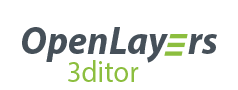
<style>
.page{position:relative;width:238px;height:90px;background:#ffffff}
.page>*{position:absolute;margin:0}
.t1{font:40px "MyriadPro-BoldIt";color:#465059;scale:0.95 1}
.t2{font:30px "MyriadPro-Regular";color:#8cbe3f;scale:0.95 1}
</style>
<div class="page">
<p class="t1" style="left:22px;top:27px;width:195px;height:36px">OpenLay   rs</p>
<p class="t2" style="left:68px;top:60px;width:71px;height:22px">3ditor</p>
</div>
